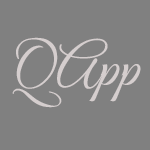
<style>
.page{position:relative;width:150px;height:150px;background:#808080}
.page>*{position:absolute;margin:0}
.t1{font:60px "GreatVibes-Regular";color:#d5cece}
</style>
<div class="page">
<p class="t1" style="left:12px;top:37px;width:129px;height:71px">QApp</p>
</div>
